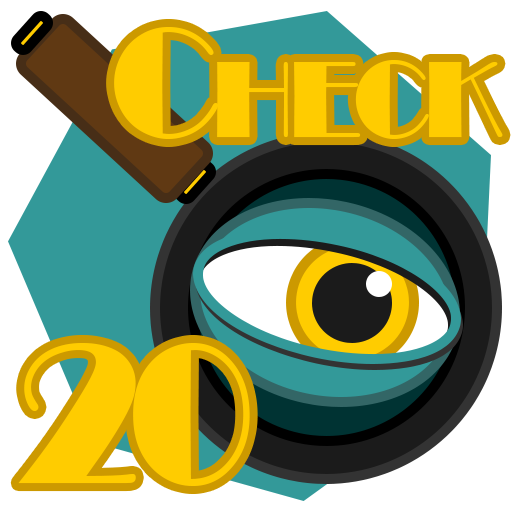
<style>
.page{position:relative;width:512px;height:512px;background:#ffffff}
.page>*{position:absolute;margin:0}
.t1{font:162.1px "Broadway";letter-spacing:-0.045em;color:#ffcc00;font-variant:small-caps;scale:0.95 1}
.t2{font:205.8px "Broadway";letter-spacing:-0.045em;color:#ffcc00;font-variant:small-caps;scale:0.95 1}
</style>
<div class="page">
<p class="t1" style="left:114px;top:27px;width:389px;height:112px">Check</p>
<p class="t2" style="left:18px;top:343px;width:232px;height:143px">20</p>
</div>
